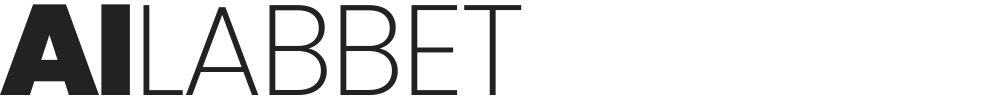
<style>
.page{position:relative;width:1000px;height:100px;background:#ffffff}
.page>*{position:absolute;margin:0}
.t1{font:128px "Poppins-ExtraLight";letter-spacing:-0.025em;color:#222222}
.t2{font:128px "Poppins-Black";letter-spacing:-0.025em;color:#222222}
</style>
<div class="page">
<p class="t1" style="left:0px;top:4px;width:522px;height:91px"><span class="t2">AI</span>LABBET</p>
</div>
